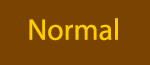
<style>
.page{position:relative;width:150px;height:65px;background:#784400}
.page>*{position:absolute;margin:0}
.t1{font:30px "MyriadHebrew-Regular";color:#ffcc00}
</style>
<div class="page">
<p class="t1" style="left:29px;top:18px;width:89px;height:23px">Normal</p>
</div>
